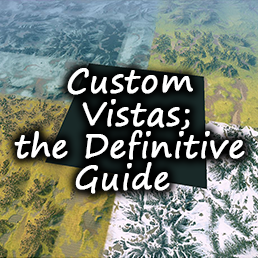
<style>
.page{position:relative;width:258px;height:258px}
.page>*{position:absolute;margin:0}
.t1{font:32.3px/32.3px "SegoePrint";color:#ffffff;font-weight:bold}
</style>
<div class="page">
<p class="t1" style="left:14px;top:68px;width:231px;height:126px;text-align:center">Custom<br> Vistas;<br>the Definitive<br>Guide</p>
</div>
